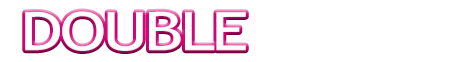
<style>
.page{position:relative;width:462px;height:62px;background:#ffffff}
.page>*{position:absolute;margin:0}
.t1{font:53.3px "TrebuchetMS";letter-spacing:-0.05em;color:#ffffff;scale:1.3 1}
</style>
<div class="page">
<p class="t1" style="left:25px;top:11px;width:221px;height:40px">DOUBLE</p>
</div>
